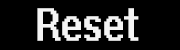
<style>
.page{position:relative;width:180px;height:50px;background:#000000}
.page>*{position:absolute;margin:0}
.t1{font:42.4px "System";color:#f4f4f4;font-weight:bold;scale:0.83 1}
</style>
<div class="page">
<p class="t1" style="left:37px;top:8px;width:102px;height:33px">Reset</p>
</div>
